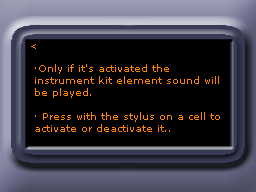
<style>
.page{position:relative;width:256px;height:192px;background:#000000}
.page>*{position:absolute;margin:0}
.t1{font:9px "MSReferenceSansSerif";color:#ff8400}
.t2{font:10px "MSReferenceSansSerif";color:#ff8400}
</style>
<div class="page">
<p class="t1" style="left:31px;top:44px;width:5px;height:5px">&lt;</p>
<p class="t2" style="left:35px;top:64px;width:185px;height:68px">·Only if it's activated the<br>instrument kit element sound will <br>be played.<br><br>· Press with the stylus on a cell to <br>activate or deactivate it..</p>
</div>
